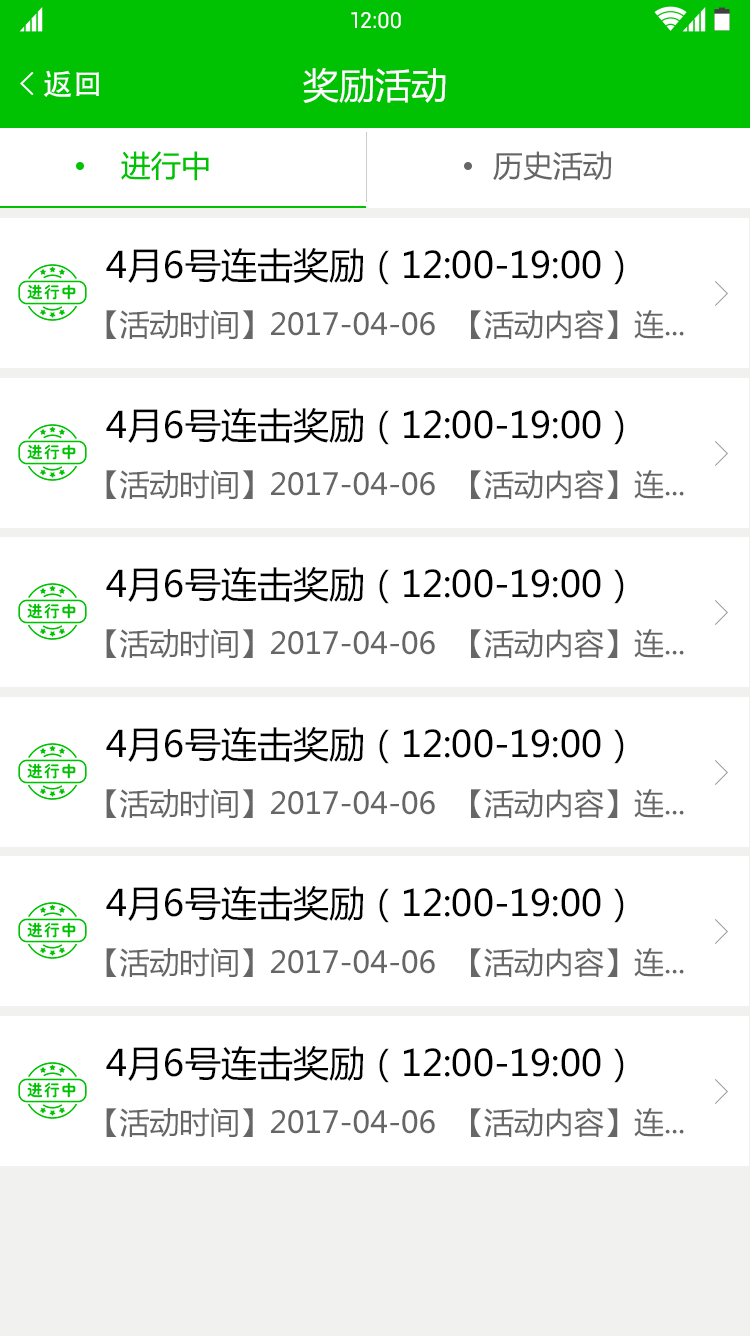
<style>
.page{position:relative;width:750px;height:1336px;background:#ffffff}
.page>*{position:absolute;margin:0}
.t1{font:22px "Roboto-Regular";color:#ffffff}
.t2{font:30px "AdobeHeitiStd-Regular";color:#ffffff}
.t3{font:36px "MicrosoftYaHei";color:#ffffff}
.t4{font:30px "MicrosoftYaHei";color:#00c203}
.t5{font:30px "MicrosoftYaHei";color:#666666}
.t6{font:36px "MicrosoftYaHei";color:#000000}
</style>
<div class="page">
<p class="t1" style="left:351px;top:12px;width:50px;height:17px">12:00</p>
<p class="t2" style="left:43px;top:70px;width:56px;height:27px">返回</p>
<p class="t3" style="left:303px;top:68px;width:143px;height:35px">奖励活动</p>
<p class="t4" style="left:121px;top:151px;width:88px;height:30px">进行中</p>
<p class="t5" style="left:493px;top:151px;width:119px;height:30px">历史活动</p>
<p class="t6" style="left:106px;top:248px;width:518px;height:37px">4月6号连击奖励（12:00-19:00）</p>
<p class="t5" style="left:106px;top:310px;width:578px;height:29px">【活动时间】2017-04-06  【活动内容】连...</p>
<p class="t6" style="left:106px;top:408px;width:518px;height:37px">4月6号连击奖励（12:00-19:00）</p>
<p class="t5" style="left:106px;top:470px;width:578px;height:29px">【活动时间】2017-04-06  【活动内容】连...</p>
<p class="t6" style="left:106px;top:567px;width:518px;height:37px">4月6号连击奖励（12:00-19:00）</p>
<p class="t5" style="left:106px;top:629px;width:578px;height:29px">【活动时间】2017-04-06  【活动内容】连...</p>
<p class="t6" style="left:106px;top:727px;width:518px;height:37px">4月6号连击奖励（12:00-19:00）</p>
<p class="t5" style="left:106px;top:789px;width:578px;height:29px">【活动时间】2017-04-06  【活动内容】连...</p>
<p class="t6" style="left:106px;top:886px;width:518px;height:37px">4月6号连击奖励（12:00-19:00）</p>
<p class="t5" style="left:106px;top:948px;width:578px;height:29px">【活动时间】2017-04-06  【活动内容】连...</p>
<p class="t6" style="left:106px;top:1046px;width:518px;height:37px">4月6号连击奖励（12:00-19:00）</p>
<p class="t5" style="left:106px;top:1108px;width:578px;height:29px">【活动时间】2017-04-06  【活动内容】连...</p>
</div>
